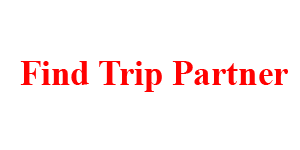
<style>
.page{position:relative;width:300px;height:150px;background:#ffffff}
.page>*{position:absolute;margin:0}
.t1{font:35px "TimesNewRomanPS-BoldMT";color:#ff0101}
</style>
<div class="page">
<p class="t1" style="left:20px;top:61px;width:268px;height:31px">Find Trip Partner</p>
</div>
